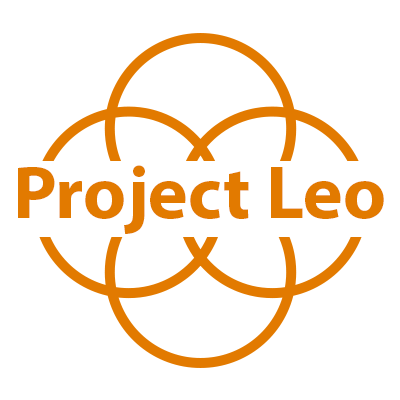
<style>
.page{position:relative;width:400px;height:400px;background:#ffffff}
.page>*{position:absolute;margin:0}
.t1{font:75px "MyriadPro-Bold";color:#e27a00}
</style>
<div class="page">
<p class="t1" style="left:18px;top:165px;width:366px;height:69px">Project Leo</p>
</div>
